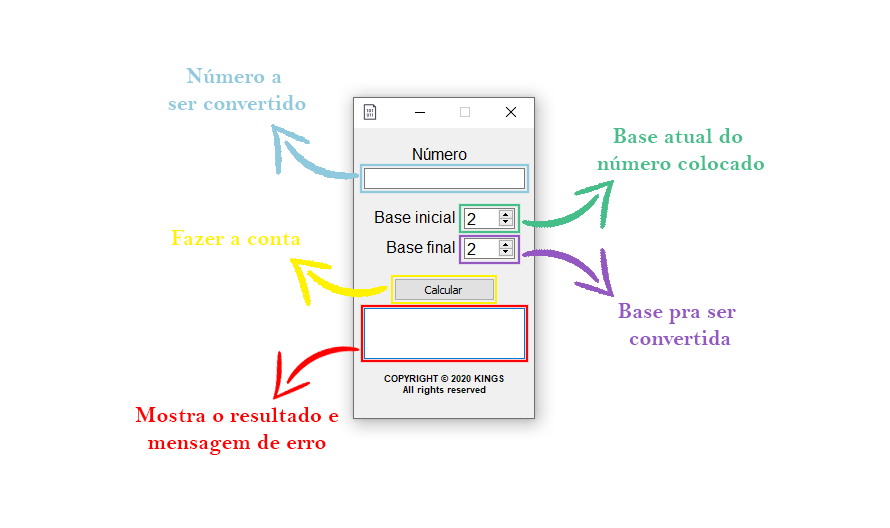
<style>
.page{position:relative;width:890px;height:528px;background:#ffffff}
.page>*{position:absolute;margin:0}
.t1{font:22.5px "BellMTBold";color:#8fc9de}
.t2{font:22.5px "BellMTBold";color:#46be8a}
.t3{font:22.5px "BellMTBold";color:#fff200}
.t4{font:22.5px "BellMTBold";color:#9458c3}
.t5{font:22.5px "BellMTBold";color:#ff0000}
</style>
<div class="page">
<p class="t1" style="left:168px;top:68px;width:138px;height:42px;text-align:center">Número a <br>ser convertido</p>
<p class="t2" style="left:597px;top:128px;width:167px;height:42px;text-align:center">Base atual do <br>número colocado</p>
<p class="t3" style="left:171px;top:230px;width:130px;height:15px">Fazer a conta</p>
<p class="t4" style="left:618px;top:303px;width:118px;height:42px;text-align:center">Base pra ser <br>convertida</p>
<p class="t5" style="left:135px;top:407px;width:204px;height:48px;text-align:center">Mostra o resultado e<br>mensagem de erro</p>
</div>
